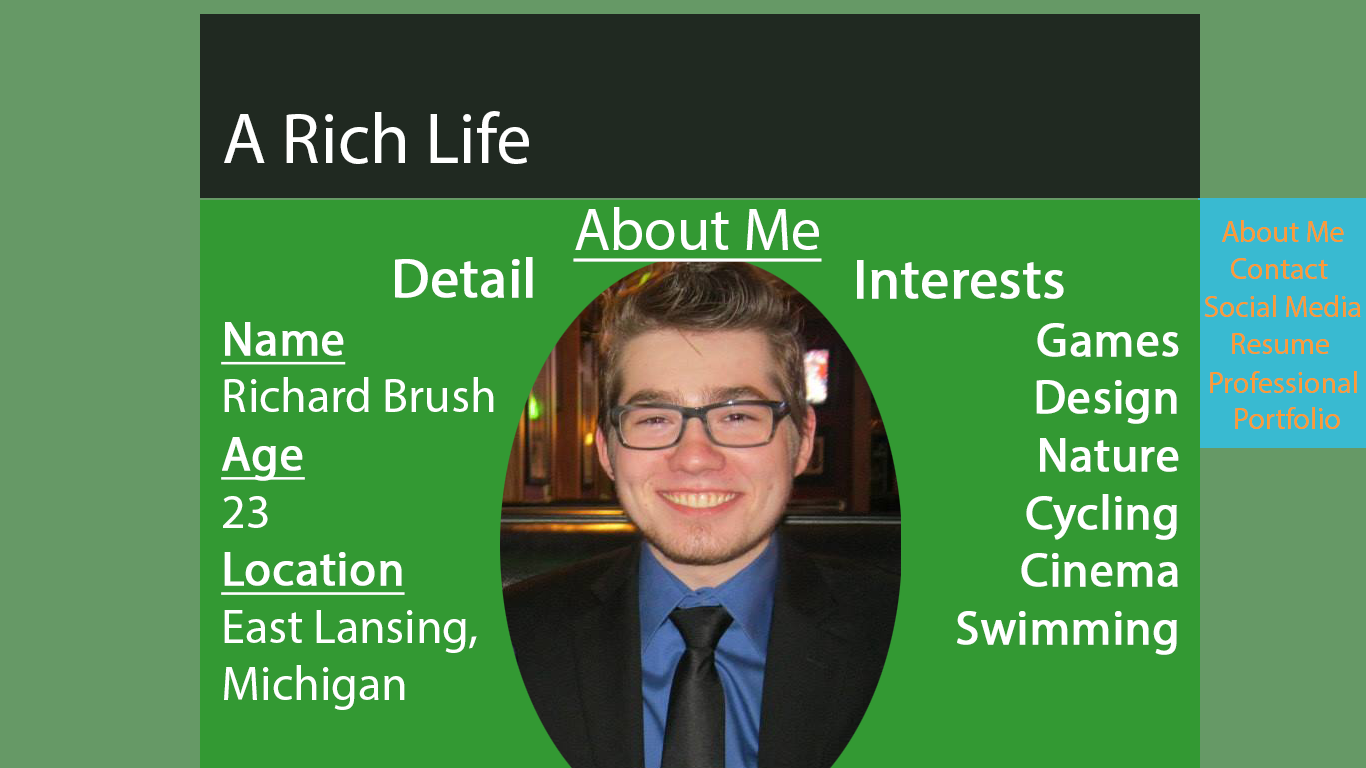
<style>
.page{position:relative;width:1366px;height:768px;background:#339933}
.page>*{position:absolute;margin:0}
.t1{font:72px "MyriadPro-Regular";color:#ffffff}
.t2{font:60px "MyriadPro-Regular";color:#ffffff;text-decoration:underline}
.t3{font:30px "MyriadPro-Regular";color:#ff9933}
.t4{font:48px "MyriadPro-Regular";color:#ffffff}
.t5{font:56px "MyriadPro-Regular";color:#ffffff;font-weight:bold}
.t6{font:48px "MyriadPro-Regular";color:#ffffff;font-weight:bold;text-decoration:underline}
.t7{font:48px "MyriadPro-Regular";color:#ffffff;font-weight:bold}
</style>
<div class="page">
<p class="t1" style="left:224px;top:111px;width:305px;height:53px">A Rich Life</p>
<p class="t2" style="left:573px;top:207px;width:249px;height:55px">About Me</p>
<p class="t3" style="left:1222px;top:220px;width:122px;height:22px">About Me</p>
<p class="t4" style="left:221px;top:257px;width:312px;height:453px;text-align:center"><span class="t5">Detail<br></span><span class="t6">Name<br></span>Richard Brush<br><span class="t6">Age<br></span>23<br><span class="t6">Location<br></span>East Lansing,<br>Michigan</p>
<p class="t7" style="left:857px;top:260px;width:322px;height:395px;text-align:center"><span class="t5">Interests<br></span>Games<br>Design<br>Nature<br>Cycling<br>Cinema<br>Swimming</p>
<p class="t3" style="left:1231px;top:258px;width:97px;height:21px">Contact</p>
<p class="t3" style="left:1204px;top:295px;width:157px;height:22px">Social Media</p>
<p class="t3" style="left:1232px;top:333px;width:97px;height:21px">Resume</p>
<p class="t3" style="left:1210px;top:371px;width:147px;height:22px">Professional</p>
<p class="t3" style="left:1235px;top:407px;width:105px;height:22px">Portfolio</p>
</div>
